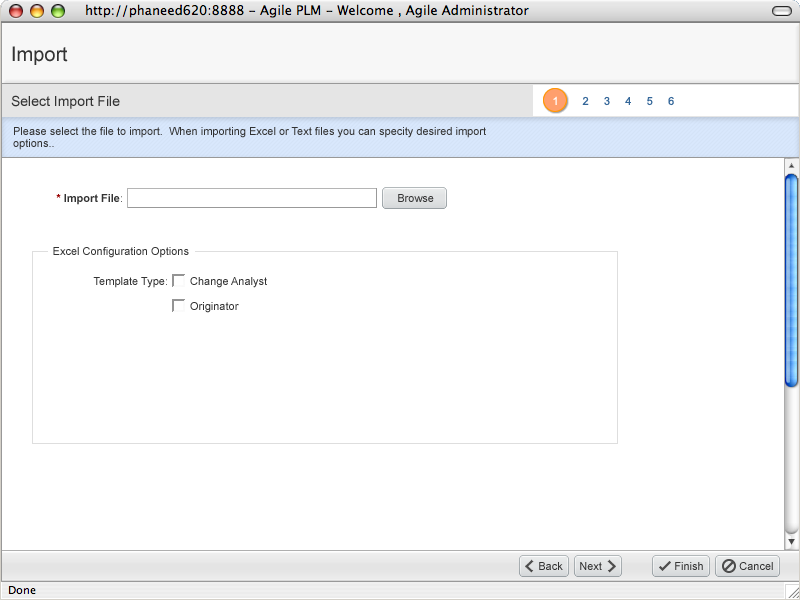
<style>
.page{position:relative;width:800px;height:600px;background:#ffffff}
.page>*{position:absolute;margin:0}
.t1{font:20px "ArialMT";color:#333333}
.t2{font:14px "ArialMT";color:#333333}
.t3{font:11px "ArialMT";color:#ffffff}
.t4{font:11px "ArialMT";color:#336699}
.t5{font:11px/12px "ArialMT";color:#333333}
.t6{font:11px "Arial-BoldMT";color:#333333}
.t7{font:11px "Arial-BoldMT";color:#990000}
.t8{font:11px "ArialMT";color:#656565}
.t9{font:11px "ArialMT";color:#333333}
</style>
<div class="page">
<p class="t1" style="left:12px;top:46px;width:56px;height:19px">Import</p>
<p class="t2" style="left:11px;top:95px;width:109px;height:14px">Select Import File</p>
<p class="t3" style="left:553px;top:96px;width:4px;height:9px">1</p>
<p class="t4" style="left:582px;top:96px;width:92px;height:10px">2     3     4     5     6</p>
<p class="t5" style="left:13px;top:127px;width:473px;height:23px">Please select the file to import.  When importing Excel or Text files you can specity desired import<br>options..</p>
<p class="t6" style="left:56px;top:194px;width:66px;height:11px"><span class="t7">*</span> Import File<span class="t8">:</span></p>
<p class="t9" style="left:398px;top:194px;width:36px;height:8px">Browse</p>
<p class="t9" style="left:53px;top:247px;width:136px;height:11px">Excel Configuration Options</p>
<p class="t9" style="left:93px;top:277px;width:74px;height:11px">Template Type<span class="t8">:</span></p>
<p class="t9" style="left:190px;top:277px;width:77px;height:11px">Change Analyst</p>
<p class="t9" style="left:190px;top:302px;width:49px;height:11px">Originator</p>
<p class="t9" style="left:539px;top:562px;width:24px;height:8px">Back</p>
<p class="t9" style="left:580px;top:562px;width:22px;height:8px">Next</p>
<p class="t9" style="left:675px;top:562px;width:28px;height:8px">Finish</p>
<p class="t9" style="left:739px;top:562px;width:34px;height:8px">Cancel</p>
</div>
